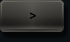
<style>
.page{position:relative;width:70px;height:42px}
.page>*{position:absolute;margin:0}
.t1{font:12px "Arial-BoldMT";color:#000000}
</style>
<div class="page">
<p class="t1" style="left:30px;top:12px;width:6px;height:7px">&gt;</p>
</div>
